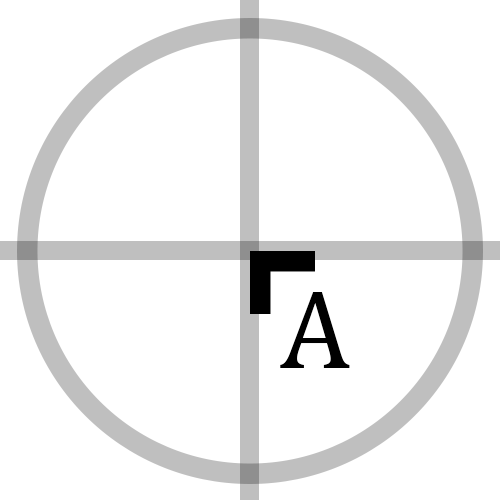
<style>
.page{position:relative;width:500px;height:500px;background:#ffffff}
.page>*{position:absolute;margin:0}
.t1{font:112.8px "CambriaMath";color:#000000}
</style>
<div class="page">
<p class="t1" style="left:280px;top:292px;width:70px;height:76px">A</p>
</div>
